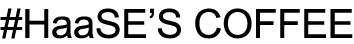
<style>
.page{position:relative;width:354px;height:44px;background:#ffffff}
.page>*{position:absolute;margin:0}
.t1{font:40px "ArialMT";letter-spacing:-0.01em;color:#000000}
</style>
<div class="page">
<p class="t1" style="left:0px;top:8px;width:353px;height:31px">#HaaSE’S COFFEE</p>
</div>
